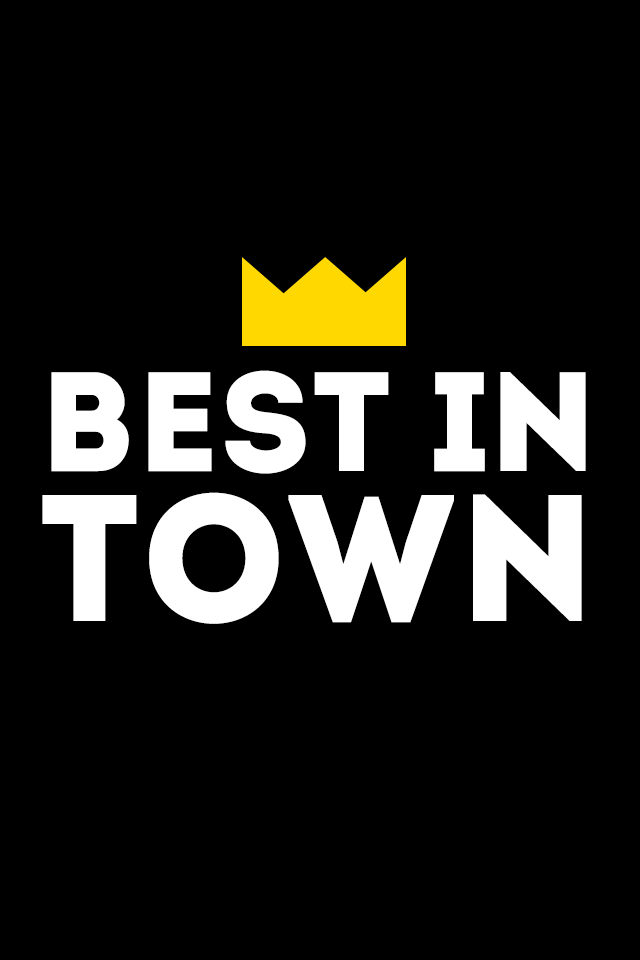
<style>
.page{position:relative;width:640px;height:960px;background:#000000}
.page>*{position:absolute;margin:0}
.t1{font:141px "Intro";color:#ffffff}
.t2{font:180px "Intro";color:#ffffff}
</style>
<div class="page">
<p class="t1" style="left:42px;top:370px;width:544px;height:254px">BEST IN <span class="t2">TOWN</span></p>
</div>
